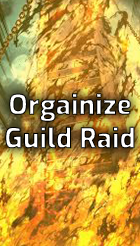
<style>
.page{position:relative;width:140px;height:246px}
.page>*{position:absolute;margin:0}
.t1{font:27.9px "ExoRoman-ExtraBold"}
</style>
<div class="page">
<p class="t1" style="left:5px;top:93px;width:130px;height:56px;text-align:center">Orgainize<br>Guild Raid</p>
</div>
